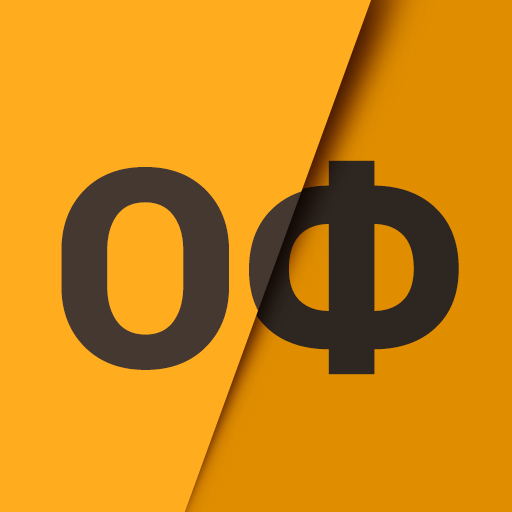
<style>
.page{position:relative;width:512px;height:512px;background:#ffad1f}
.page>*{position:absolute;margin:0}
.t1{font:277.2px "Roboto-Black";letter-spacing:-0.005em;color:#453831}
.t2{font:277.2px "Roboto-Black";letter-spacing:-0.005em;color:#2e2621}
</style>
<div class="page">
<p class="t1" style="left:61px;top:161px;width:403px;height:215px">ОФ</p>
<p class="t2" style="left:244px;top:160px;width:215px;height:215px">Ф</p>
</div>
